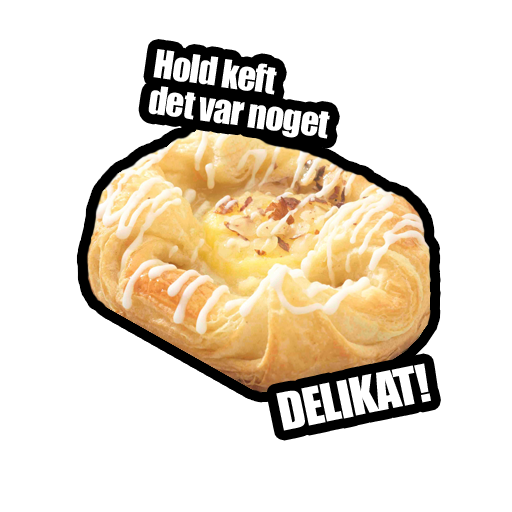
<style>
.page{position:relative;width:512px;height:512px;background:#ffffff}
.page>*{position:absolute;margin:0}
.t1{font:36px/36px "Impact";letter-spacing:-0.025em;color:#ffffff}
.t2{font:48px "Impact";letter-spacing:-0.025em;color:#ffffff}
</style>
<div class="page">
<p class="t1" style="left:148px;top:49px;width:182px;height:90px;rotate:8deg">Hold keft<br>det var noget</p>
<p class="t2" style="left:276px;top:363px;width:155px;height:68px;rotate:-12deg">DELIKAT!</p>
</div>
